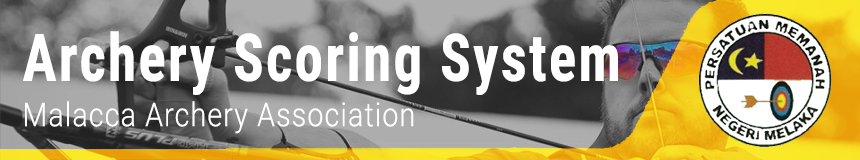
<style>
.page{position:relative;width:860px;height:160px}
.page>*{position:absolute;margin:0}
.t1{font:65.8px "RobotoCondensed-Bold";letter-spacing:0.04em;color:#ffffff;scale:0.87 1}
.t2{font:33px "Roboto-Light";letter-spacing:0.04em;color:#ffffff;scale:0.87 1}
</style>
<div class="page">
<p class="t1" style="left:23px;top:31px;width:595px;height:64px">Archery Scoring System</p>
<p class="t2" style="left:25px;top:101px;width:389px;height:33px">Malacca Archery Association</p>
</div>
